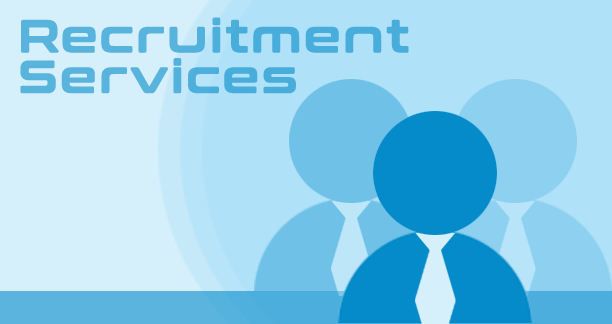
<style>
.page{position:relative;width:612px;height:324px;background:#afe1f8}
.page>*{position:absolute;margin:0}
.t1{font:44.9px/40.6px "ConthraxSb-Regular";letter-spacing:0.05em;color:#52b1dd;font-weight:bold}
</style>
<div class="page">
<p class="t1" style="left:20px;top:17px;width:389px;height:77px">Recruitment<br>Services</p>
</div>
